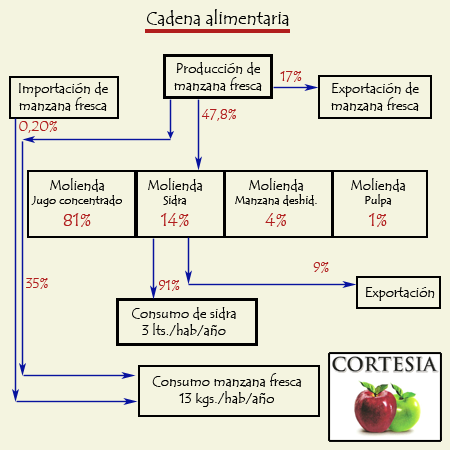
<style>
.page{position:relative;width:450px;height:450px;background:#f4f4e0}
.page>*{position:absolute;margin:0}
.t1{font:18px "TempusSansITC";color:#000000}
.t2{font:14px "TempusSansITC";color:#000000}
.t3{font:14px "TempusSansITC";color:#b11e1e}
.t4{font:12px "TempusSansITC";color:#000000}
.t5{font:18px "TempusSansITC";color:#b11e1e}
</style>
<div class="page">
<p class="t1" style="left:147px;top:9px;width:142px;height:17px">Cadena alimentaria</p>
<p class="t2" style="left:174px;top:62px;width:88px;height:29px;text-align:center">Producción de<br>manzana fresca</p>
<p class="t3" style="left:280px;top:71px;width:22px;height:11px">17%</p>
<p class="t2" style="left:19px;top:82px;width:89px;height:29px;text-align:center">Importación de<br>manzana fresca</p>
<p class="t2" style="left:331px;top:82px;width:88px;height:29px;text-align:center">Exportación de<br>manzana fresca</p>
<p class="t3" style="left:201px;top:109px;width:35px;height:12px">47,8%</p>
<p class="t3" style="left:19px;top:121px;width:38px;height:12px">0,20%</p>
<p class="t4" style="left:31px;top:178px;width:91px;height:49px;text-align:center"><span class="t2">Molienda<br></span>Jugo concentrado<br><span class="t5">81%</span></p>
<p class="t2" style="left:148px;top:178px;width:55px;height:49px;text-align:center">Molienda<br><span class="t4">Sidra<br></span><span class="t5">14%</span></p>
<p class="t4" style="left:235px;top:178px;width:82px;height:49px;text-align:center"><span class="t2">Molienda<br></span>Manzana deshid.<br><span class="t5">4%</span></p>
<p class="t2" style="left:351px;top:178px;width:55px;height:49px;text-align:center">Molienda<br><span class="t4">Pulpa<br></span><span class="t5">1%</span></p>
<p class="t3" style="left:313px;top:262px;width:16px;height:11px">9%</p>
<p class="t3" style="left:26px;top:278px;width:22px;height:11px">35%</p>
<p class="t3" style="left:159px;top:280px;width:21px;height:11px">91%</p>
<p class="t2" style="left:366px;top:287px;width:69px;height:14px">Exportación</p>
<p class="t2" style="left:132px;top:307px;width:104px;height:29px;text-align:center">Consumo de sidra<br>3 lts./hab/año</p>
<p class="t2" style="left:152px;top:373px;width:150px;height:34px;text-align:center">Consumo manzana fresca<br>13 kgs./hab/año</p>
</div>
